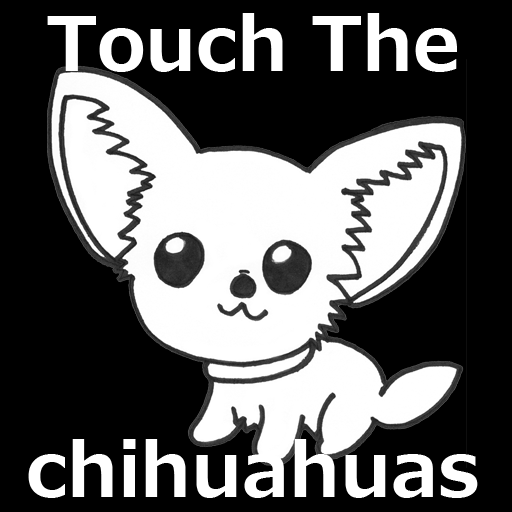
<style>
.page{position:relative;width:512px;height:512px;background:#000000}
.page>*{position:absolute;margin:0}
.t1{font:74.7px "Meiryo-Bold";color:#ffffff}
</style>
<div class="page">
<p class="t1" style="left:47px;top:13px;width:410px;height:59px">Touch The</p>
<p class="t1" style="left:28px;top:439px;width:450px;height:59px">chihuahuas</p>
</div>
